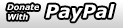
<style>
.page{position:relative;width:123px;height:28px}
.page>*{position:absolute;margin:0}
.t1{font:8px "Verdana-BoldItalic";color:#ffffff}
.t2{font:18px "Verdana-BoldItalic";color:#ffffff}
</style>
<div class="page">
<p class="t1" style="left:7px;top:4px;width:32px;height:16px">Donate <br>With</p>
<p class="t2" style="left:45px;top:4px;width:70px;height:18px">PayPal</p>
</div>
